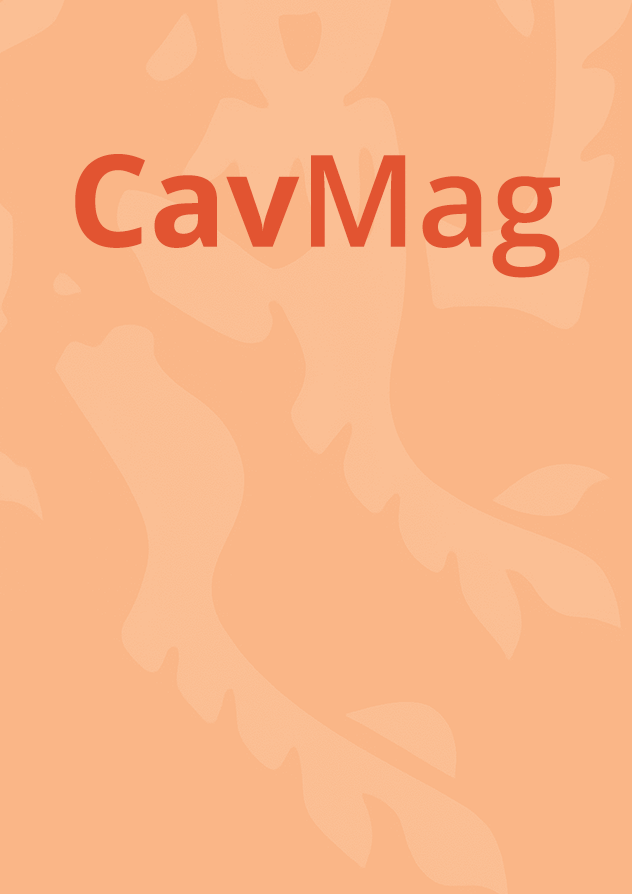
<style>
.page{position:relative;width:632px;height:894px;background:#fab687}
.page>*{position:absolute;margin:0}
.t1{font:127.8px "OpenSans-Bold";color:#e25431}
.t2{font:127.8px "OpenSans-SemiBold";color:#e25431}
</style>
<div class="page">
<p class="t1" style="left:75px;top:154px;width:485px;height:124px">Cav<span class="t2">Mag</span></p>
</div>
